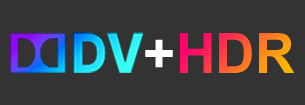
<style>
.page{position:relative;width:305px;height:105px;background:#333333}
.page>*{position:absolute;margin:0}
.t1{font:55.9px "Arial-BoldMT";color:#ffffff}
.t2{font:55.9px "Arial-BoldMT"}
</style>
<div class="page">
<p class="t1" style="left:145px;top:39px;width:28px;height:29px">+</p>
<p class="t2" style="left:180px;top:33px;width:115px;height:40px">HDR</p>
</div>
